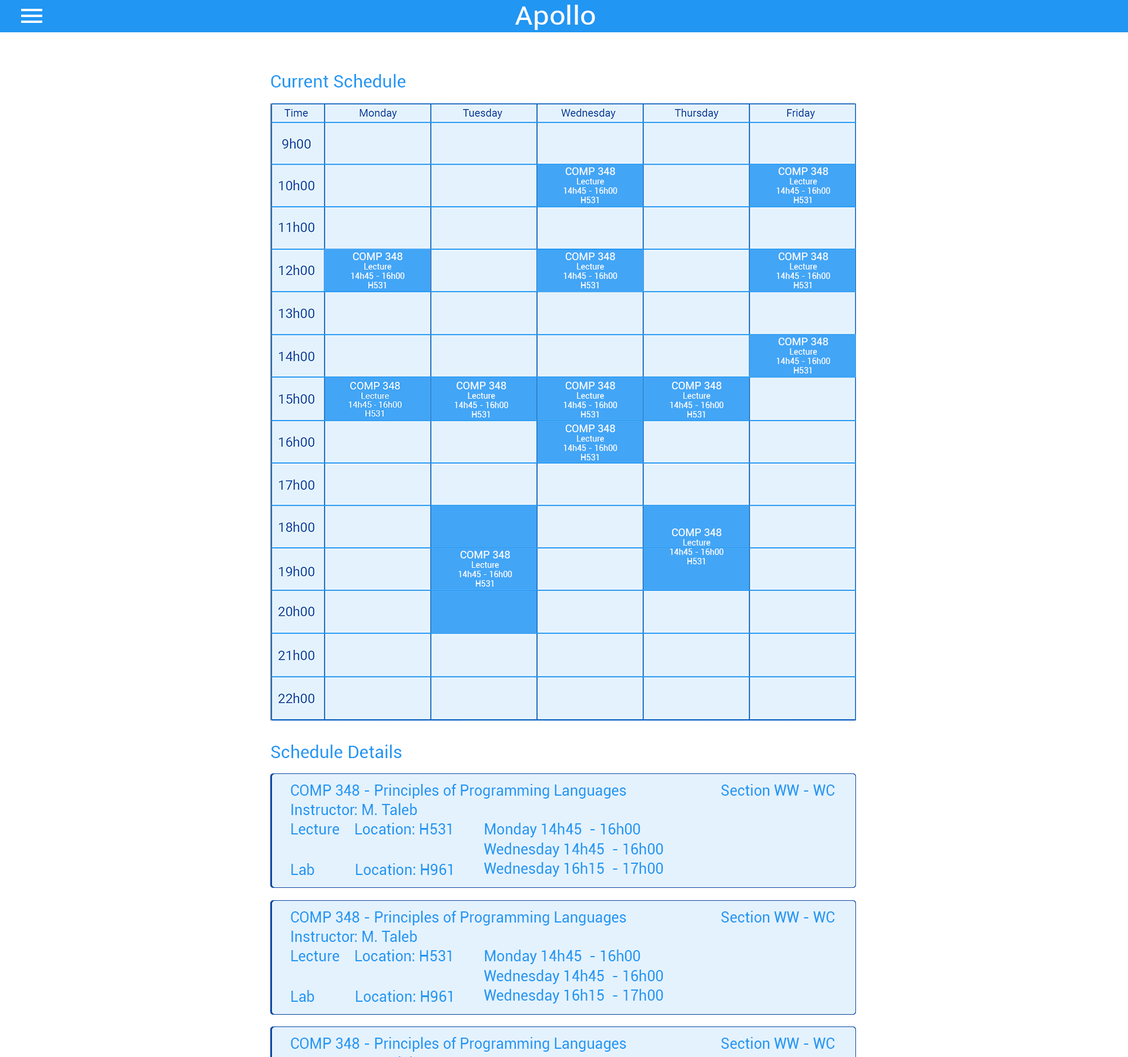
<style>
.page{position:relative;width:1128px;height:1057px;background:#ffffff}
.page>*{position:absolute;margin:0}
.t1{font:26.4px "Roboto-Regular";color:#ffffff;scale:1.08 1}
.t2{font:17.6px "Roboto-Regular";color:#2196f3}
.t3{font:8.2px/9.4px "Roboto-Regular";color:#ffffff}
.t4{font:10.6px/11.7px "Roboto-Regular";color:#ffffff}
.t5{font:14.7px/19.4px "Roboto-Regular";color:#2196f3}
.t6{font:14.7px "Roboto-Regular";color:#2196f3}
</style>
<div class="page">
<p class="t1" style="left:515px;top:5px;width:80px;height:25px">Apollo</p>
<p class="t2" style="left:271px;top:74px;width:135px;height:14px">Current Schedule</p>
<p class="t3" style="left:563px;top:167px;width:54px;height:36px;text-align:center"><span class="t4">COMP 348<br></span>Lecture<br>14h45 - 16h00<br>H531</p>
<p class="t3" style="left:777px;top:167px;width:53px;height:36px;text-align:center"><span class="t4">COMP 348<br></span>Lecture<br>14h45 - 16h00<br>H531</p>
<p class="t3" style="left:351px;top:253px;width:54px;height:35px;text-align:center"><span class="t4">COMP 348<br></span>Lecture<br>14h45 - 16h00<br>H531</p>
<p class="t3" style="left:563px;top:253px;width:54px;height:35px;text-align:center"><span class="t4">COMP 348<br></span>Lecture<br>14h45 - 16h00<br>H531</p>
<p class="t3" style="left:777px;top:253px;width:53px;height:35px;text-align:center"><span class="t4">COMP 348<br></span>Lecture<br>14h45 - 16h00<br>H531</p>
<p class="t3" style="left:777px;top:338px;width:53px;height:36px;text-align:center"><span class="t4">COMP 348<br></span>Lecture<br>14h45 - 16h00<br>H531</p>
<p class="t3" style="left:455px;top:382px;width:53px;height:36px;text-align:center"><span class="t4">COMP 348<br></span>Lecture<br>14h45 - 16h00<br>H531</p>
<p class="t3" style="left:563px;top:382px;width:54px;height:36px;text-align:center"><span class="t4">COMP 348<br></span>Lecture<br>14h45 - 16h00<br>H531</p>
<p class="t3" style="left:670px;top:382px;width:54px;height:36px;text-align:center"><span class="t4">COMP 348<br></span>Lecture<br>14h45 - 16h00<br>H531</p>
<p class="t3" style="left:563px;top:425px;width:54px;height:36px;text-align:center"><span class="t4">COMP 348<br></span>Lecture<br>14h45 - 16h00<br>H531</p>
<p class="t3" style="left:670px;top:529px;width:54px;height:35px;text-align:center"><span class="t4">COMP 348<br></span>Lecture<br>14h45 - 16h00<br>H531</p>
<p class="t3" style="left:458px;top:551px;width:54px;height:36px;text-align:center"><span class="t4">COMP 348<br></span>Lecture<br>14h45 - 16h00<br>H531</p>
<p class="t2" style="left:271px;top:745px;width:131px;height:13px">Schedule Details</p>
<p class="t5" style="left:291px;top:784px;width:335px;height:51px">COMP 348 - Principles of Programming Languages <br>Instructor: M. Taleb<br>Lecture    Location: H531</p>
<p class="t6" style="left:721px;top:784px;width:114px;height:12px">Section WW - WC</p>
<p class="t6" style="left:485px;top:823px;width:155px;height:15px">Monday 14h45  - 16h00</p>
<p class="t6" style="left:484px;top:843px;width:179px;height:15px">Wednesday 14h45  - 16h00</p>
<p class="t6" style="left:291px;top:863px;width:161px;height:12px">Lab           Location: H961</p>
<p class="t6" style="left:484px;top:862px;width:179px;height:15px">Wednesday 16h15  - 17h00</p>
<p class="t5" style="left:291px;top:911px;width:335px;height:51px">COMP 348 - Principles of Programming Languages <br>Instructor: M. Taleb<br>Lecture    Location: H531</p>
<p class="t6" style="left:721px;top:911px;width:114px;height:12px">Section WW - WC</p>
<p class="t6" style="left:485px;top:950px;width:155px;height:15px">Monday 14h45  - 16h00</p>
<p class="t6" style="left:484px;top:970px;width:179px;height:14px">Wednesday 14h45  - 16h00</p>
<p class="t6" style="left:484px;top:989px;width:179px;height:15px">Wednesday 16h15  - 17h00</p>
<p class="t6" style="left:291px;top:990px;width:161px;height:12px">Lab           Location: H961</p>
<p class="t6" style="left:721px;top:1037px;width:114px;height:12px">Section WW - WC</p>
</div>
